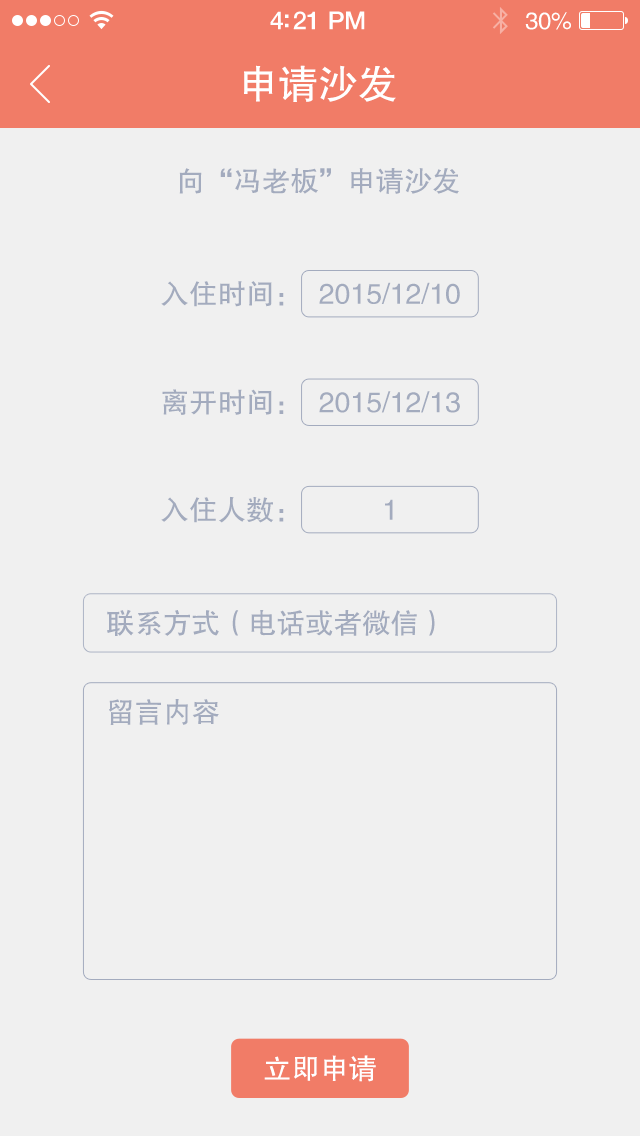
<style>
.page{position:relative;width:640px;height:1136px;background:#f0f0f0}
.page>*{position:absolute;margin:0}
.t1{font:25px "HelveticaNeue-Medium";letter-spacing:-0.02em;color:#ffffff}
.t2{font:24px "FZHTJW--GB1-0";letter-spacing:-0.02em;color:#ffffff}
.t3{font:40px "FZHTJW--GB1-0";color:#ffffff}
.t4{font:28.5px "FZHTJW--GB1-0";color:#a3abbe}
.t5{font:28.5px "FZHTJW--GB1-0";color:#ffffff}
</style>
<div class="page">
<p class="t1" style="left:270px;top:11px;width:95px;height:19px">4:21 PM</p>
<p class="t2" style="left:525px;top:12px;width:46px;height:18px">30%</p>
<p class="t3" style="left:244px;top:65px;width:152px;height:37px">申请沙发</p>
<p class="t4" style="left:179px;top:168px;width:280px;height:26px">向“冯老板”申请沙发</p>
<p class="t4" style="left:161px;top:281px;width:123px;height:26px">入住时间：</p>
<p class="t4" style="left:319px;top:282px;width:141px;height:22px">2015/12/10</p>
<p class="t4" style="left:162px;top:389px;width:122px;height:26px">离开时间：</p>
<p class="t4" style="left:319px;top:391px;width:141px;height:22px">2015/12/13</p>
<p class="t4" style="left:161px;top:496px;width:123px;height:27px">入住人数：</p>
<p class="t4" style="left:385px;top:499px;width:8px;height:21px">1</p>
<p class="t4" style="left:107px;top:609px;width:328px;height:27px">联系方式（电话或者微信）</p>
<p class="t4" style="left:109px;top:699px;width:110px;height:26px">留言内容</p>
<p class="t5" style="left:264px;top:1055px;width:112px;height:27px">立即申请</p>
</div>
